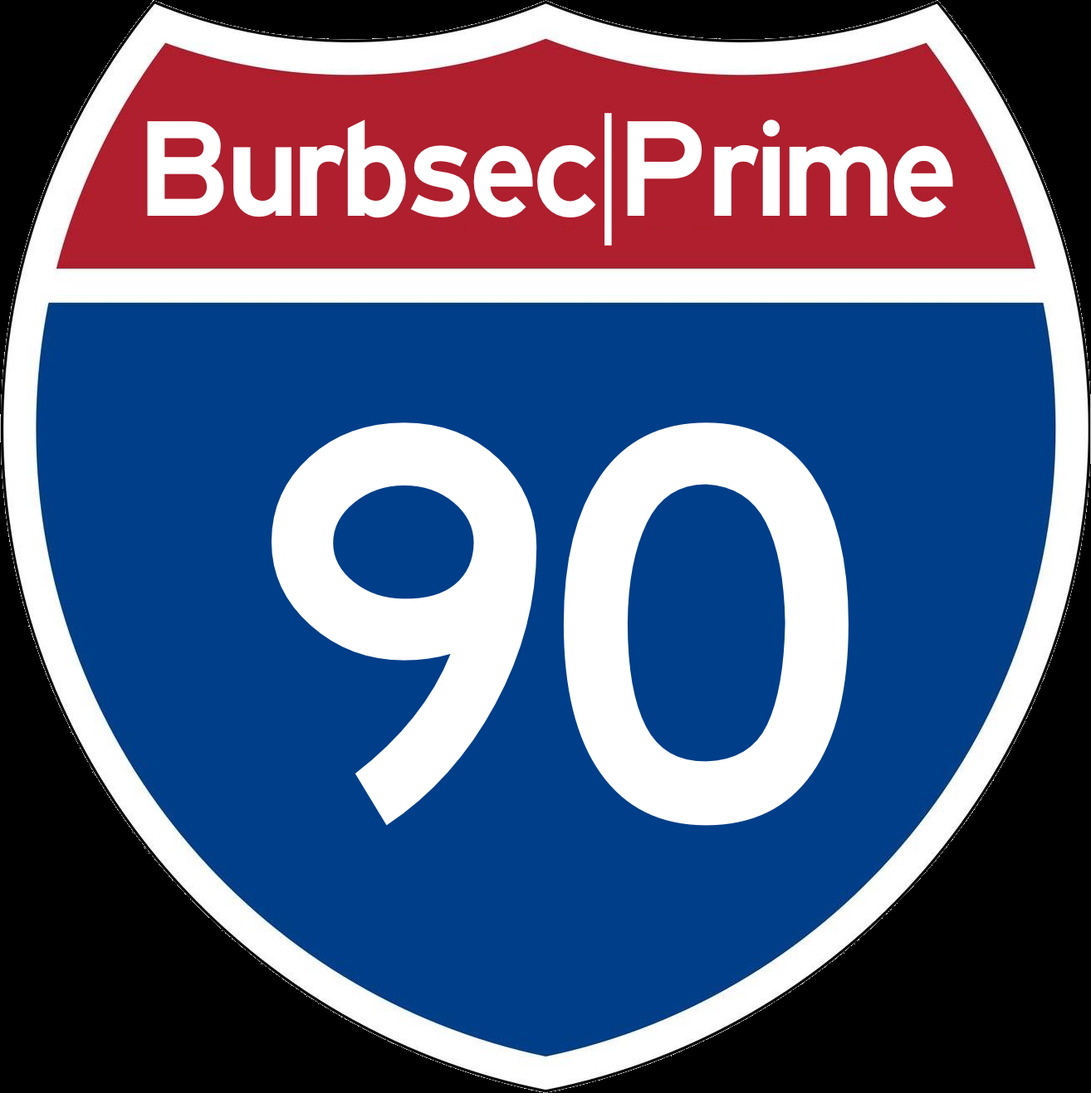
<style>
.page{position:relative;width:1091px;height:1093px;background:#003e89}
.page>*{position:absolute;margin:0}
.t1{font:141.1px "HighwayGothicWide";letter-spacing:-0.04em;color:#ffffff}
.t2{font:581.1px "HighwayGothic";letter-spacing:-0.04em;color:#ffffff}
</style>
<div class="page">
<p class="t1" style="left:147px;top:113px;width:806px;height:133px">Burbsec|Prime</p>
<p class="t2" style="left:271px;top:423px;width:577px;height:403px">90</p>
</div>
